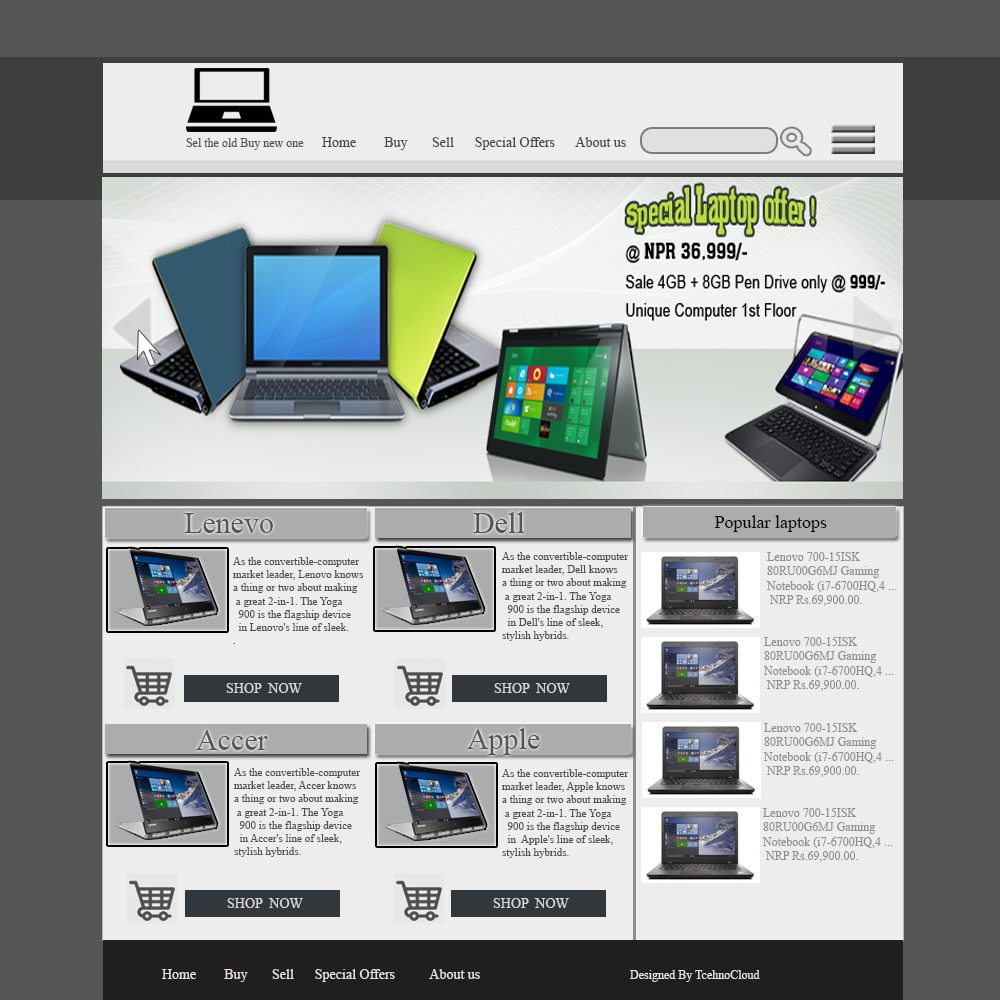
<style>
.page{position:relative;width:1000px;height:1000px;background:#ededed}
.page>*{position:absolute;margin:0}
.t1{font:14px "TimesNewRomanPSMT";color:#484747}
.t2{font:12px "TimesNewRomanPSMT";color:#535352}
.t3{font:30px "TimesNewRomanPSMT";color:#535657}
.t4{font:18px "TimesNewRomanPSMT";color:#070707}
.t5{font:11px "TimesNewRomanPSMT";color:#525050}
.t6{font:12px "TimesNewRomanPSMT";color:#525050}
.t7{font:11px "TimesNewRomanPSMT";color:#000000}
.t8{font:12px "TimesNewRomanPSMT";color:#8d8f90}
.t9{font:14px "TimesNewRomanPSMT";color:#d8d5d5}
.t10{font:14px "TimesNewRomanPSMT";color:#e5e1e1}
.t11{font:12px "TimesNewRomanPSMT";color:#e5e1e1}
</style>
<div class="page">
<p class="t1" style="left:322px;top:137px;width:304px;height:13px">Home        Buy       Sell      Special Offers      About us</p>
<p class="t2" style="left:186px;top:138px;width:118px;height:12px">Sel the old Buy new one</p>
<p class="t3" style="left:184px;top:513px;width:89px;height:20px">Lenevo</p>
<p class="t4" style="left:714px;top:515px;width:113px;height:17px">Popular laptops</p>
<p class="t5" style="left:233px;top:557px;width:130px;height:87px"><span class="t6">   </span>As the convertible-computer <br>   market leader, Lenovo knows<br>   a thing or two about making <br>    a great 2-in-1. The Yoga <br>     900 is the flagship device <br>     in Lenovo's line of sleek.<br>   .</p>
<p class="t5" style="left:502px;top:552px;width:126px;height:89px"><span class="t7">   </span>As the convertible-computer <br>   market leader, Dell knows<br>   a thing or two about making <br>    a great 2-in-1. The Yoga <br>     900 is the flagship device <br>     in Dell's line of sleek, <br>   stylish hybrids.</p>
<p class="t8" style="left:766px;top:552px;width:131px;height:54px">Lenovo 700-15ISK <br>80RU00G6MJ Gaming <br>Notebook (i7-6700HQ,4 ...<br> NRP Rs.69,900.00.</p>
<p class="t8" style="left:763px;top:637px;width:131px;height:54px">Lenovo 700-15ISK <br>80RU00G6MJ Gaming <br>Notebook (i7-6700HQ,4 ...<br> NRP Rs.69,900.00.</p>
<p class="t9" style="left:226px;top:683px;width:76px;height:10px">SHOP  NOW</p>
<p class="t9" style="left:494px;top:683px;width:76px;height:10px">SHOP  NOW</p>
<p class="t8" style="left:763px;top:723px;width:131px;height:54px">Lenovo 700-15ISK <br>80RU00G6MJ Gaming <br>Notebook (i7-6700HQ,4 ...<br> NRP Rs.69,900.00.</p>
<p class="t3" style="left:196px;top:730px;width:72px;height:20px">Accer</p>
<p class="t3" style="left:467px;top:728px;width:73px;height:27px">Apple</p>
<p class="t5" style="left:234px;top:768px;width:126px;height:89px"><span class="t7">   </span>As the convertible-computer <br>   market leader, Accer knows<br>   a thing or two about making <br>    a great 2-in-1. The Yoga <br>     900 is the flagship device <br>     in Accer's line of sleek, <br>   stylish hybrids.</p>
<p class="t5" style="left:502px;top:769px;width:126px;height:89px"><span class="t7">   </span>As the convertible-computer <br>   market leader, Apple knows<br>   a thing or two about making <br>    a great 2-in-1. The Yoga <br>     900 is the flagship device <br>     in  Apple's line of sleek, <br>   stylish hybrids.</p>
<p class="t8" style="left:762px;top:808px;width:131px;height:54px">Lenovo 700-15ISK <br>80RU00G6MJ Gaming <br>Notebook (i7-6700HQ,4 ...<br> NRP Rs.69,900.00.</p>
<p class="t9" style="left:227px;top:898px;width:76px;height:10px">SHOP  NOW</p>
<p class="t9" style="left:493px;top:898px;width:76px;height:10px">SHOP  NOW</p>
<p class="t10" style="left:162px;top:969px;width:598px;height:13px">Home        Buy       Sell      Special Offers          About us<span class="t11">     Designed By TcehnoCloud</span></p>
</div>
